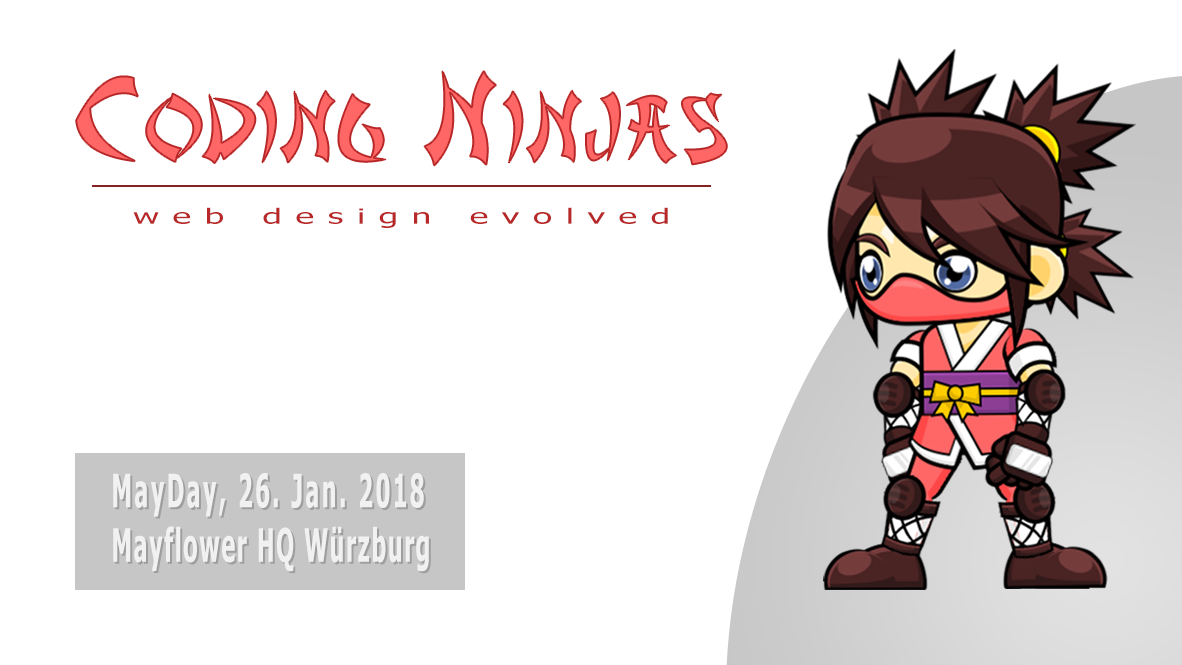
<style>
.page{position:relative;width:1182px;height:665px;background:#ffffff}
.page>*{position:absolute;margin:0}
.t1{font:88.1px "AsianDelight";letter-spacing:0.06em;color:#ff6666;scale:0.93 1}
.t2{font:115.2px "AsianDelight";letter-spacing:0.06em;color:#ff6666;scale:0.93 1}
.t3{font:21px "Tahoma";letter-spacing:0.392em;color:#b82828;scale:1.67 1}
.t4{font:46px/54.5px "Tahoma-Bold";letter-spacing:0.112em;color:#f1f1f1;scale:0.5 1}
.t5{font:46px/54.5px "Tahoma-Bold";letter-spacing:0.075em;color:#f1f1f1;scale:0.5 1}
</style>
<div class="page">
<p class="t1" style="left:76px;top:71px;width:651px;height:95px"><span class="t2">C</span>ODING<span class="t2"> N</span>INJAS</p>
<p class="t3" style="left:133px;top:207px;width:535px;height:21px">web design evolved</p>
<p class="t4" style="left:113px;top:473px;width:316px;height:99px">MayDay, 26. Jan. 2018<br><span class="t5">Mayflower HQ Würzburg</span></p>
</div>
